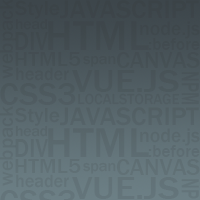
<style>
.page{position:relative;width:200px;height:200px}
.page>*{position:absolute;margin:0}
.t1{font:21px "FranklinGothic-Medium";color:#3c4448}
.t2{font:26.3px "FranklinGothic-Medium";color:#3c4448}
.t3{font:43px "FranklinGothic-Medium";color:#40494d}
.t4{font:20.2px "FranklinGothic-Medium";color:#3f484c}
.t5{font:26.3px "FranklinGothic-Medium";color:#414a4f;scale:0.88 1}
.t6{font:17.5px "FranklinGothic-Medium";color:#424b50}
.t7{font:21px "FranklinGothic-Medium";color:#444f53;scale:1.06 1}
.t8{font:22.8px "FranklinGothic-Medium";color:#454f54;scale:1.04 1}
.t9{font:15.8px "FranklinGothic-Medium";color:#454f54}
.t10{font:18.4px "FranklinGothic-Medium";color:#495359}
.t11{font:31.6px "FranklinGothic-Medium";color:#4b565a;scale:1.2 1}
.t12{font:25.4px "FranklinGothic-Medium";color:#4c585d;scale:0.65 1}
.t13{font:33.3px "FranklinGothic-Medium";color:#4e5a5f}
.t14{font:14.9px "FranklinGothic-Medium";color:#4f5b61}
.t15{font:20.2px "FranklinGothic-Medium";color:#5b6a6f;scale:1.03 1}
.t16{font:21px "FranklinGothic-Medium";color:#536166}
.t17{font:26.3px "FranklinGothic-Medium";color:#536166}
.t18{font:14.9px "FranklinGothic-Medium";color:#58666b;scale:1.03 1}
.t19{font:43px "FranklinGothic-Medium";color:#5a696e}
.t20{font:20.2px "FranklinGothic-Medium";color:#59676c}
.t21{font:26.3px "FranklinGothic-Medium";color:#5b6a70;scale:0.88 1}
.t22{font:17.5px "FranklinGothic-Medium";color:#5c6b71}
.t23{font:21px "FranklinGothic-Medium";color:#5f6f74;scale:1.06 1}
.t24{font:22.8px "FranklinGothic-Medium";color:#607074;scale:1.04 1}
.t25{font:18.4px "FranklinGothic-Medium";color:#627278}
.t26{font:15.8px "FranklinGothic-Medium";color:#607075}
.t27{font:31.6px "FranklinGothic-Medium";color:#637379;scale:1.2 1}
</style>
<div class="page">
<p class="t1" style="left:15px;top:0px;width:45px;height:19px">Style</p>
<p class="t2" style="left:60px;top:0px;width:139px;height:19px">JAVASCRIPT</p>
<p class="t3" style="left:48px;top:21px;width:101px;height:29px">HTML</p>
<p class="t4" style="left:140px;top:21px;width:60px;height:18px">node.js</p>
<p class="t5" style="left:15px;top:32px;width:33px;height:18px">DIV</p>
<p class="t6" style="left:148px;top:38px;width:52px;height:12px">:before</p>
<p class="t7" style="left:15px;top:52px;width:66px;height:14px">HTML5</p>
<p class="t8" style="left:116px;top:52px;width:84px;height:16px">CANVAS</p>
<p class="t9" style="left:83px;top:55px;width:33px;height:12px">span</p>
<p class="t10" style="left:16px;top:67px;width:53px;height:14px">header</p>
<p class="t11" style="left:72px;top:70px;width:107px;height:22px">VUE.JS</p>
<p class="t12" style="left:181px;top:72px;width:18px;height:33px;rotate:90deg">NPM</p>
<p class="t13" style="left:0px;top:83px;width:76px;height:22px">CSS3</p>
<p class="t14" style="left:78px;top:93px;width:102px;height:12px">LOCALSTORAGE</p>
<p class="t15" style="left:0px;top:106px;width:16px;height:80px;rotate:-90deg">webpack</p>
<p class="t16" style="left:15px;top:107px;width:45px;height:19px">Style</p>
<p class="t17" style="left:60px;top:107px;width:139px;height:19px">JAVASCRIPT</p>
<p class="t18" style="left:15px;top:125px;width:33px;height:12px">head</p>
<p class="t19" style="left:48px;top:128px;width:101px;height:29px">HTML</p>
<p class="t20" style="left:140px;top:128px;width:60px;height:18px">node.js</p>
<p class="t21" style="left:15px;top:139px;width:33px;height:18px">DIV</p>
<p class="t22" style="left:148px;top:145px;width:52px;height:12px">:before</p>
<p class="t23" style="left:15px;top:159px;width:66px;height:14px">HTML5</p>
<p class="t24" style="left:116px;top:159px;width:84px;height:16px">CANVAS</p>
<p class="t25" style="left:16px;top:174px;width:53px;height:14px">header</p>
<p class="t26" style="left:83px;top:162px;width:33px;height:12px">span</p>
<p class="t27" style="left:72px;top:177px;width:107px;height:22px">VUE.JS</p>
</div>
